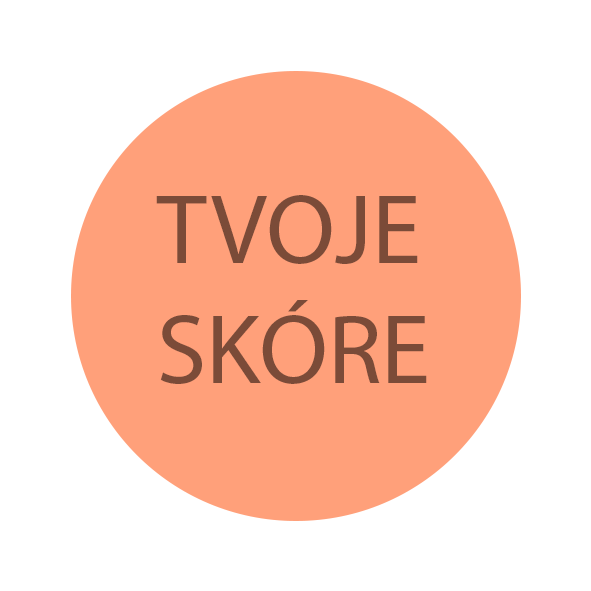
<style>
.page{position:relative;width:591px;height:591px;background:#ffffff}
.page>*{position:absolute;margin:0}
.t1{font:100px "MyriadPro-Regular";color:#7b4b38}
</style>
<div class="page">
<p class="t1" style="left:156px;top:195px;width:271px;height:189px">TVOJE SKÓRE</p>
</div>
